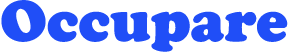
<style>
.page{position:relative;width:288px;height:52px;background:#ffffff}
.page>*{position:absolute;margin:0}
.t1{font:60px "CooperBlack";color:#204ef7}
</style>
<div class="page">
<p class="t1" style="left:1px;top:0px;width:287px;height:52px">Occupare</p>
</div>
